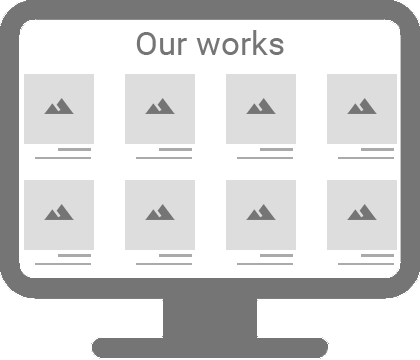
<style>
.page{position:relative;width:420px;height:360px;background:#ffffff}
.page>*{position:absolute;margin:0}
.t1{font:33.3px "Roboto-Regular";color:#757575}
</style>
<div class="page">
<p class="t1" style="left:136px;top:30px;width:148px;height:25px">Our works</p>
</div>
